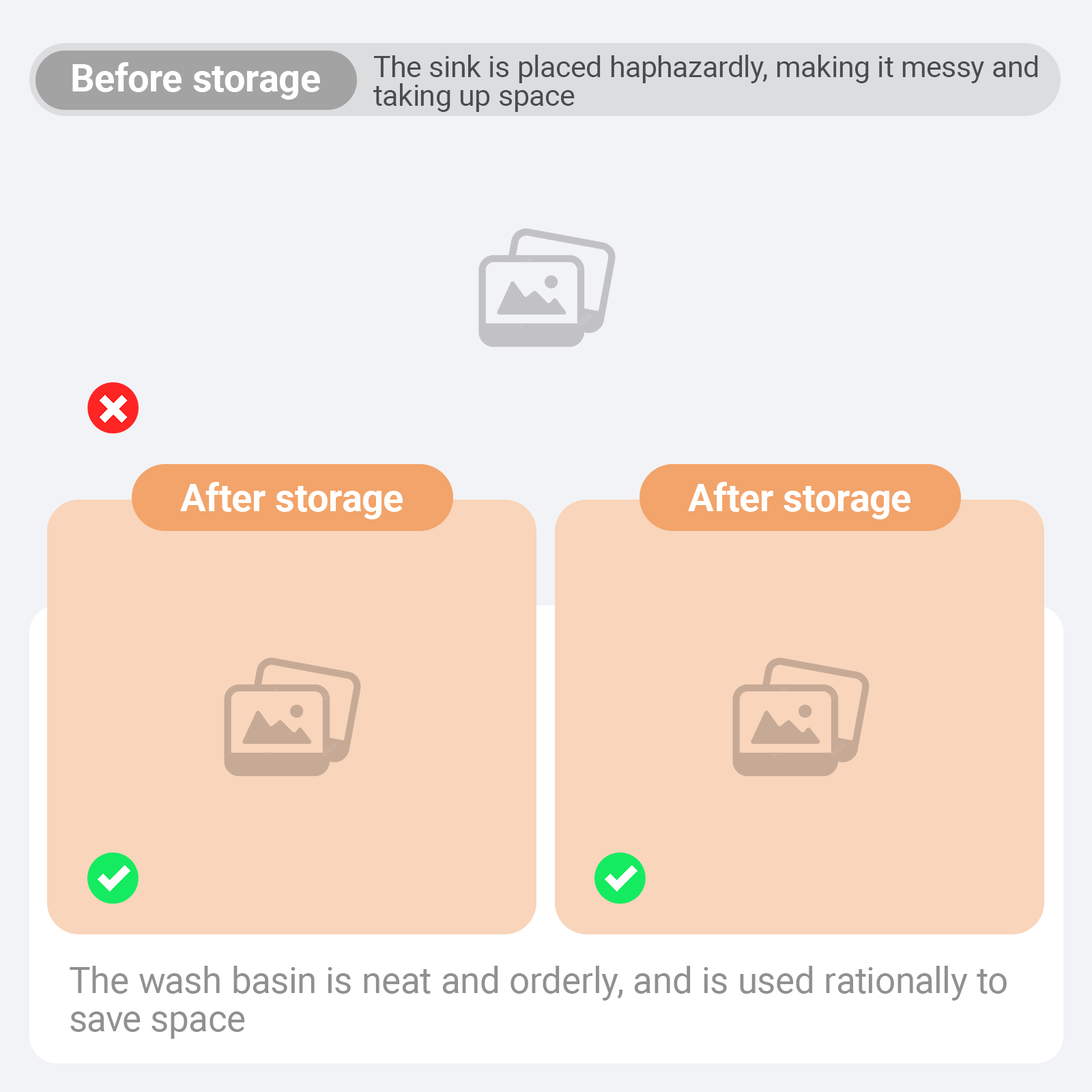
<style>
.page{position:relative;width:1092px;height:1092px;background:#f2f3f6}
.page>*{position:absolute;margin:0}
.t1{font:38.2px "Roboto-Bold";color:#ffffff}
.t2{font:29.1px/29.1px "Roboto-Regular";color:#4a4b4c}
.t3{font:36.4px/38.2px "Roboto-Regular";color:#909090}
</style>
<div class="page">
<p class="t1" style="left:72px;top:62px;width:248px;height:38px">Before storage</p>
<p class="t2" style="left:373px;top:55px;width:665px;height:57px">The sink is placed haphazardly, making it messy and taking up space</p>
<p class="t1" style="left:180px;top:482px;width:223px;height:37px">After storage</p>
<p class="t1" style="left:688px;top:482px;width:222px;height:37px">After storage</p>
<p class="t3" style="left:70px;top:966px;width:937px;height:73px">The wash basin is neat and orderly, and is used rationally to save space</p>
</div>
